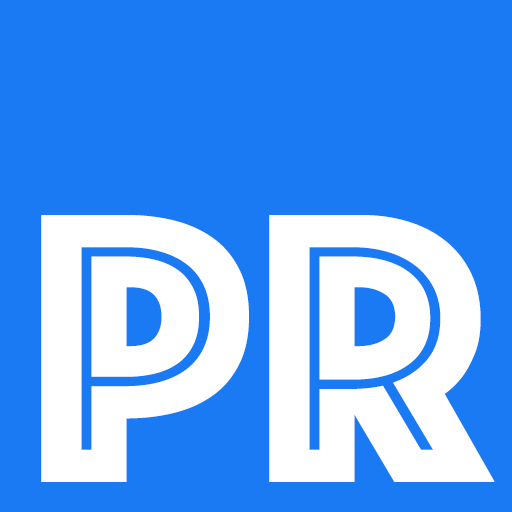
<style>
.page{position:relative;width:512px;height:512px;background:#197af4}
.page>*{position:absolute;margin:0}
.t1{font:400px "Phosphate-Inline";color:#ffffff}
</style>
<div class="page">
<p class="t1" style="left:41px;top:215px;width:454px;height:267px">PR</p>
</div>
